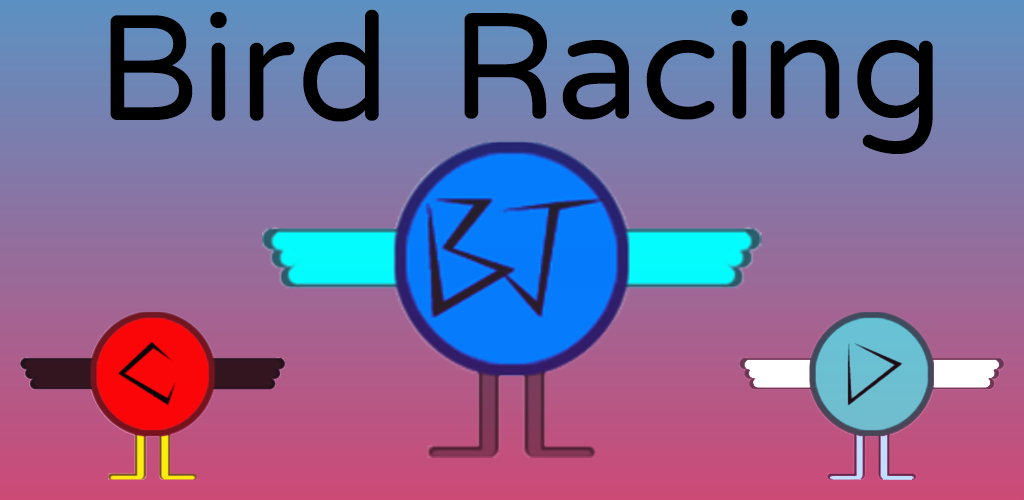
<style>
.page{position:relative;width:1024px;height:500px}
.page>*{position:absolute;margin:0}
.t1{font:150px "VarelaRound";color:#000000}
</style>
<div class="page">
<p class="t1" style="left:110px;top:9px;width:269px;height:113px">Bird</p>
<p class="t1" style="left:464px;top:10px;width:469px;height:145px">Racing</p>
</div>
